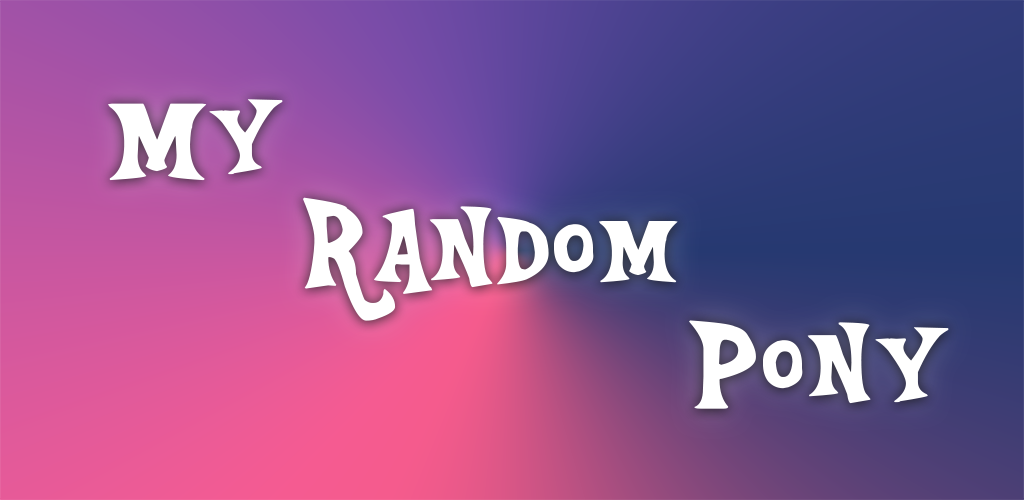
<style>
.page{position:relative;width:1024px;height:500px}
.page>*{position:absolute;margin:0}
.t1{font:144px "Equestria";color:#ffffff}
</style>
<div class="page">
<p class="t1" style="left:108px;top:99px;width:175px;height:82px">My</p>
<p class="t1" style="left:303px;top:197px;width:375px;height:124px">Random</p>
<p class="t1" style="left:689px;top:320px;width:260px;height:89px">Pony</p>
</div>
